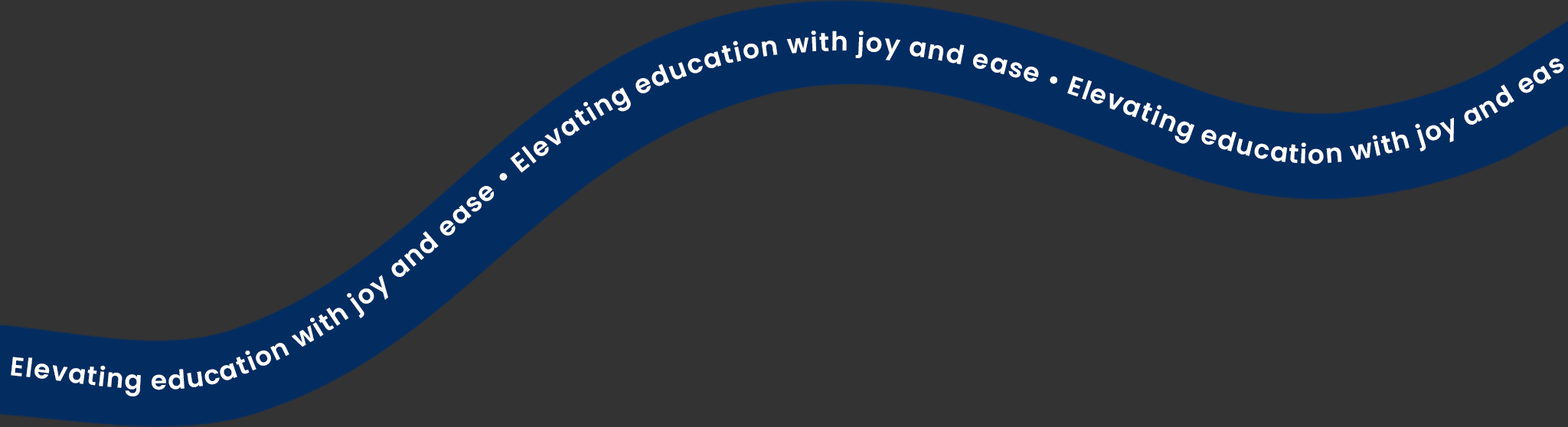
<style>
.page{position:relative;width:1568px;height:427px;background:#333333}
.page>*{position:absolute;margin:0}
.t1{font:26.2px "Poppins-SemiBold";letter-spacing:0.05em;color:#ffffff}
</style>
<div class="page">
<p class="t1" style="left:11px;top:31px;width:1553px;height:366px">Elevating education with joy and ease • Elevating education with joy and ease • Elevating education with joy and eas</p>
</div>
